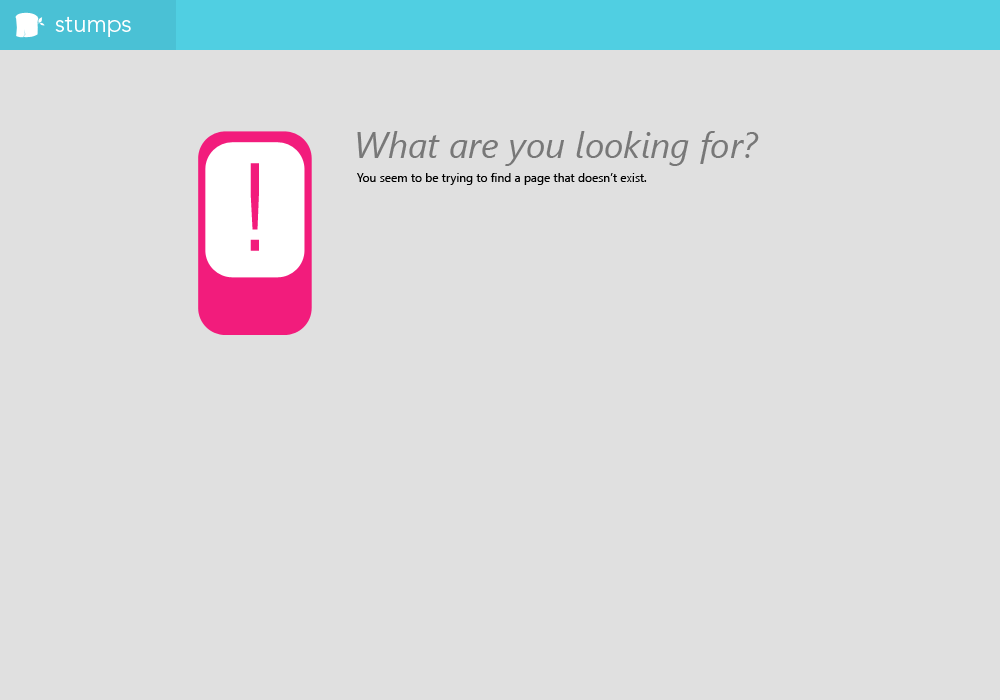
<style>
.page{position:relative;width:1000px;height:700px;background:#e0e0e0}
.page>*{position:absolute;margin:0}
.t1{font:24px "Avenir-Light";color:#ffffff}
.t2{font:36px "SegoeUI-Italic";color:#787878}
.t3{font:121.1px "DotumChe";color:#f21c7c}
.t4{font:12px "SegoeUI";color:#000000}
</style>
<div class="page">
<p class="t1" style="left:55px;top:16px;width:76px;height:21px">stumps</p>
<p class="t2" style="left:357px;top:131px;width:402px;height:35px">What are you looking for?</p>
<p class="t3" style="left:250px;top:163px;width:9px;height:88px">!</p>
<p class="t4" style="left:357px;top:173px;width:290px;height:12px">You seem to be trying to find a page that doesn’t exist.</p>
</div>
